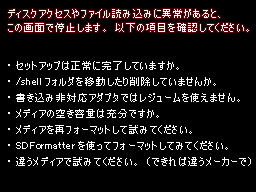
<style>
.page{position:relative;width:256px;height:192px;background:#000000}
.page>*{position:absolute;margin:0}
.t1{font:11px/14px "MS-UIGothic";color:#ffffff}
.t2{font:11px/16px "MS-UIGothic";color:#ffffff}
</style>
<div class="page">
<p class="t1" style="left:8px;top:9px;width:241px;height:23px">ディスクアクセスやファイル読み込みに異常があると、<br>この画面で停止します。以下の項目を確認してください。</p>
<p class="t2" style="left:8px;top:61px;width:243px;height:105px">・セットアップは正常に完了していますか。<br>・/shellフォルダを移動したり削除していませんか。<br>・書き込み非対応アダプタではレジュームを使えません。<br>・メディアの空き容量は充分ですか。<br>・メディアを再フォーマットして試みてください。<br>・SDFormatterを使ってフォーマットしてみてください。<br>・違うメディアで試みてください。（できれば違うメーカーで）</p>
</div>
